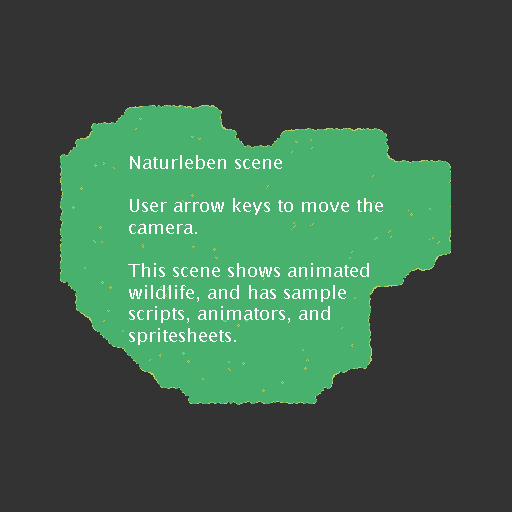
<style>
.page{position:relative;width:512px;height:512px;background:#333333}
.page>*{position:absolute;margin:0}
.t1{font:18px "LucidaSans";color:#ffffff}
</style>
<div class="page">
<p class="t1" style="left:128px;top:155px;width:255px;height:190px">Naturleben scene<br><br>User arrow keys to move the <br>camera.<br><br>This scene shows animated <br>wildlife, and has sample <br>scripts, animators, and <br>spritesheets.</p>
</div>
